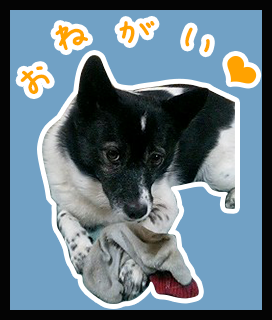
<style>
.page{position:relative;width:272px;height:320px;background:#71a1c5}
.page>*{position:absolute;margin:0}
.t1{font:46px "APJapanesefont";letter-spacing:-0.24em;color:#ffa200}
</style>
<div class="page">
<p class="t1" style="left:55px;top:25px;width:33px;height:25px;rotate:-16deg">ね</p>
<p class="t1" style="left:119px;top:21px;width:36px;height:22px">が</p>
<p class="t1" style="left:185px;top:27px;width:25px;height:26px;rotate:40deg">い</p>
<p class="t1" style="left:20px;top:66px;width:30px;height:28px;rotate:-36deg">お</p>
</div>
